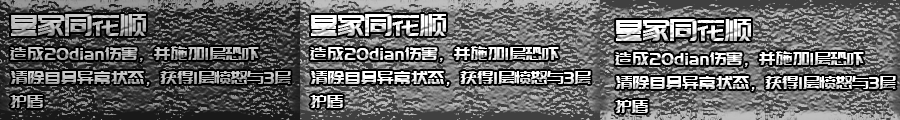
<style>
.page{position:relative;width:900px;height:120px}
.page>*{position:absolute;margin:0}
.t1{font:30px "PangMenZhengDao";letter-spacing:-0.01em}
.t2{font:30px "PangMenZhengDao";letter-spacing:-0.01em;color:#ffffff}
.t3{font:18px/24px "PangMenZhengDao";letter-spacing:-0.01em;color:#c0c0c0}
.t4{font:18px/24px "PangMenZhengDao";letter-spacing:-0.01em;color:#ffffff}
</style>
<div class="page">
<p class="t1" style="left:11px;top:14px;width:135px;height:22px">皇家同花顺</p>
<p class="t2" style="left:311px;top:14px;width:135px;height:22px">皇家同花顺</p>
<p class="t2" style="left:616px;top:19px;width:135px;height:22px">皇家同花顺</p>
<p class="t3" style="left:10px;top:46px;width:281px;height:62px">造成20dian伤害，并施加1层恐吓<br>清除自身异常状态，获得1层愤怒与3层护盾</p>
<p class="t4" style="left:310px;top:46px;width:281px;height:62px">造成20dian伤害，并施加1层恐吓<br>清除自身异常状态，获得1层愤怒与3层护盾</p>
<p class="t4" style="left:615px;top:51px;width:281px;height:62px">造成20dian伤害，并施加1层恐吓<br>清除自身异常状态，获得1层愤怒与3层护盾</p>
</div>
